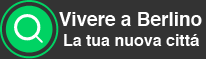
<style>
.page{position:relative;width:206px;height:59px;background:#333333}
.page>*{position:absolute;margin:0}
.t1{font:19px "Helvetica-Bold";color:#ffffff}
.t2{font:16px "Helvetica-Bold";color:#ffffff}
</style>
<div class="page">
<p class="t1" style="left:59px;top:12px;width:143px;height:14px">Vivere a Berlino</p>
<p class="t2" style="left:64px;top:34px;width:135px;height:12px">La tua nuova cittá</p>
</div>
